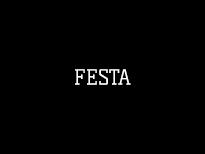
<style>
.page{position:relative;width:205px;height:154px;background:#000000}
.page>*{position:absolute;margin:0}
.t1{font:20.8px "KellySlab-Regular";color:#ffffff}
</style>
<div class="page">
<p class="t1" style="left:75px;top:69px;width:56px;height:16px">FESTA</p>
</div>
